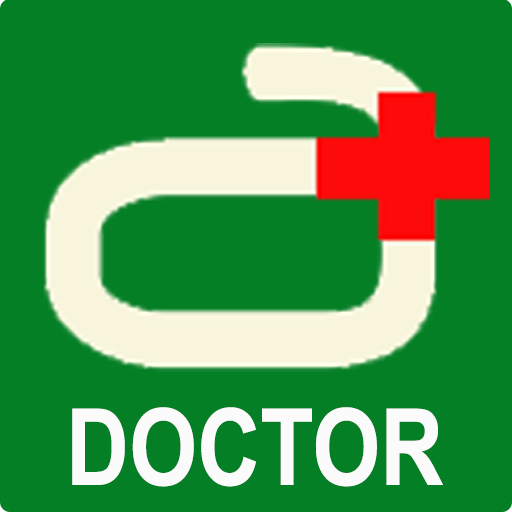
<style>
.page{position:relative;width:512px;height:512px;background:#057f26}
.page>*{position:absolute;margin:0}
.t1{font:106.7px "ArialNarrow-Bold";color:#fcfcfc}
</style>
<div class="page">
<p class="t1" style="left:72px;top:407px;width:371px;height:80px">DOCTOR</p>
</div>
